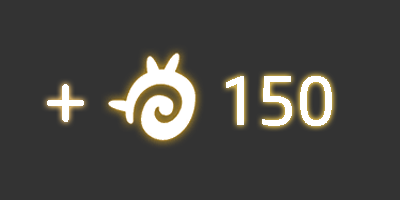
<style>
.page{position:relative;width:400px;height:200px;background:#333333}
.page>*{position:absolute;margin:0}
.t1{font:72px "HPSimplified-Regular";color:#ffffff}
.t2{font:72px "NanumSquareRoundB";color:#ffffff}
</style>
<div class="page">
<p class="t1" style="left:226px;top:76px;width:106px;height:50px">150</p>
<p class="t2" style="left:47px;top:84px;width:37px;height:38px">+</p>
</div>
